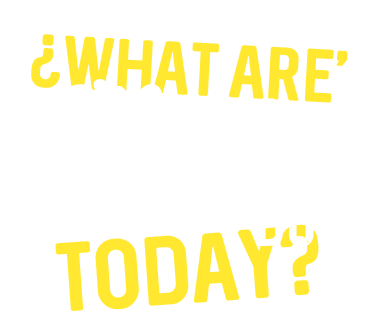
<style>
.page{position:relative;width:389px;height:313px;background:#ffffff}
.page>*{position:absolute;margin:0}
.t1{font:60px "Sequel-Regular";color:#ffe82f}
.t2{font:78.6px "Sequel-Regular";color:#ffe82f}
</style>
<div class="page">
<p class="t1" style="left:31px;top:34px;width:317px;height:69px;rotate:3deg">¿WHAT ARE'</p>
<p class="t2" style="left:55px;top:224px;width:264px;height:87px;rotate:-4deg">TODAY?</p>
</div>
